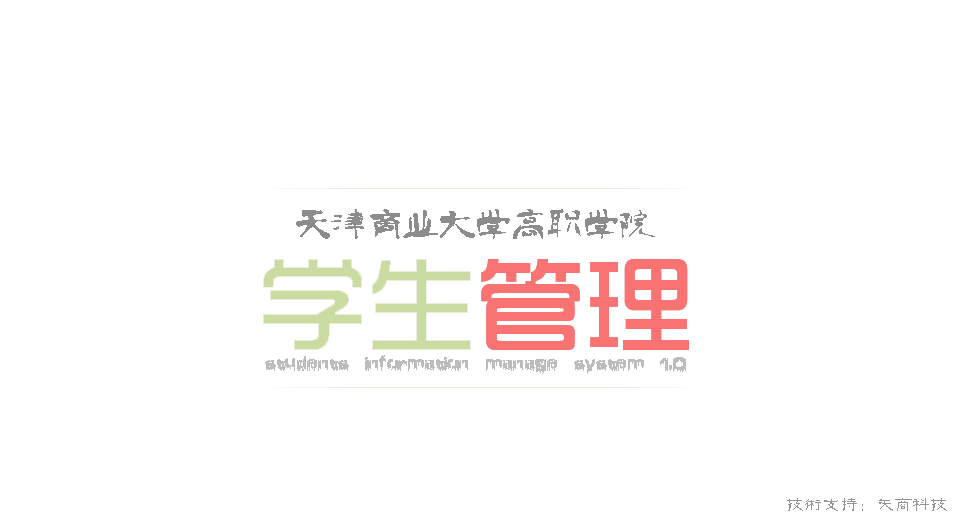
<style>
.page{position:relative;width:978px;height:529px;background:#ffffff}
.page>*{position:absolute;margin:0}
.t1{font:36px "-";color:#8d8c8c}
.t2{font:36px "BrainDamage";color:#bcbcbc;scale:0.88 1}
.t3{font:18px "FZGLFW--GB1-0";color:#959595}
</style>
<div class="page">
<p class="t1" style="left:296px;top:209px;width:359px;height:30px">天津商业大学高职学院</p>
<p class="t2" style="left:265px;top:355px;width:421px;height:19px">students information manage system 1.0</p>
<p class="t3" style="left:787px;top:498px;width:160px;height:13px">技术支持：天商科技</p>
</div>
